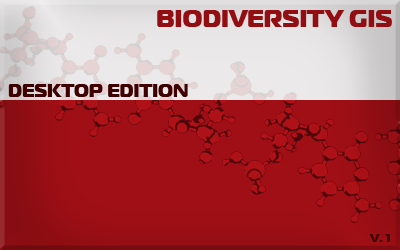
<style>
.page{position:relative;width:400px;height:250px}
.page>*{position:absolute;margin:0}
.t1{font:24px "ft40-Roman";color:#930e13}
.t2{font:18px "ft40-Roman";color:#3e0000}
.t3{font:12px "ft40-Roman";color:#3e0000}
</style>
<div class="page">
<p class="t1" style="left:157px;top:10px;width:235px;height:17px">BIODIVERSITY GIS</p>
<p class="t2" style="left:8px;top:84px;width:180px;height:13px">DESKTOP EDITION</p>
<p class="t3" style="left:369px;top:234px;width:21px;height:8px">V. 1</p>
</div>
